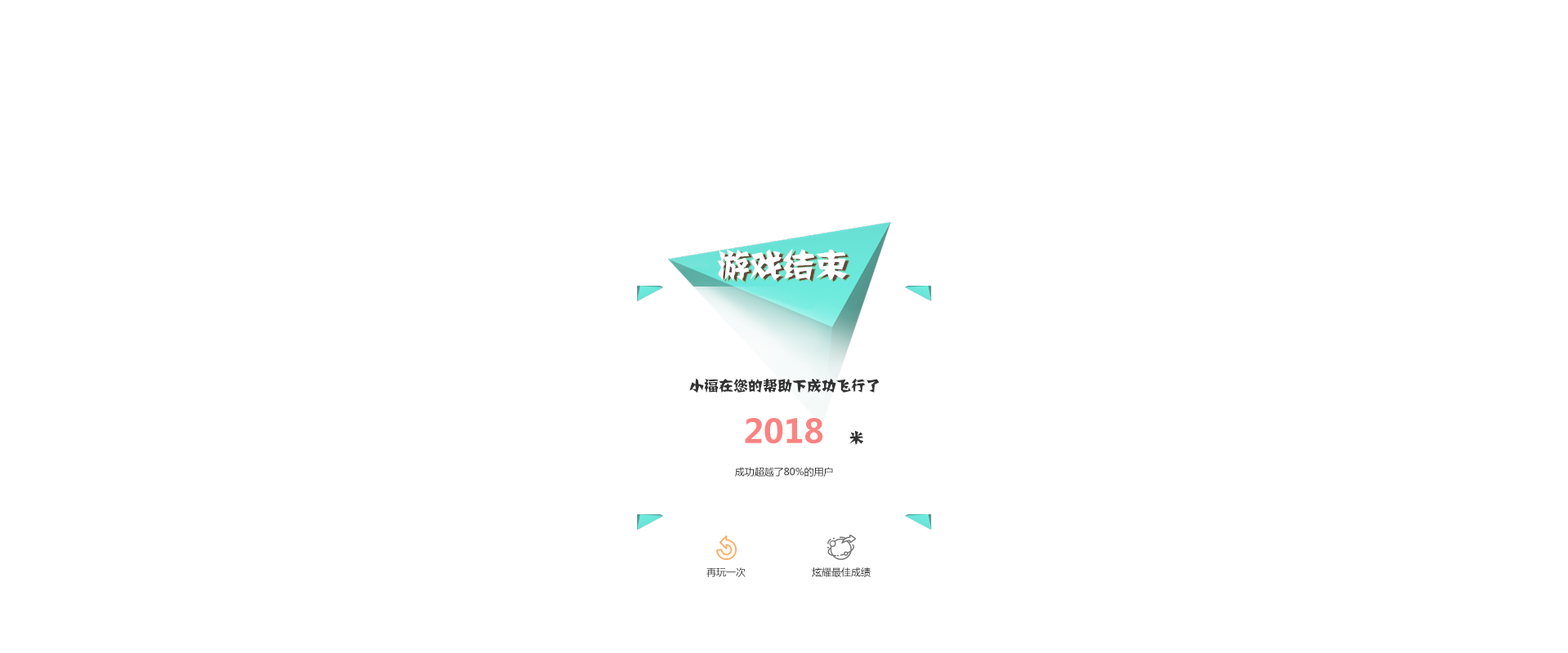
<style>
.page{position:relative;width:1568px;height:653px;background:#ffffff}
.page>*{position:absolute;margin:0}
.t1{font:32.7px "JJianzi";color:#ffffff}
.t2{font:32.7px "JJianzi"}
.t3{font:14.7px/52.3px "JJianzi";color:#333333}
.t4{font:32.7px "MicrosoftYaHei-Bold";color:#fa8381}
.t5{font:9.8px "MicrosoftYaHei";color:#333333}
</style>
<div class="page">
<p class="t1" style="left:717px;top:249px;width:131px;height:32px">游戏结束</p>
<p class="t2" style="left:720px;top:251px;width:131px;height:32px">游戏结束</p>
<p class="t3" style="left:689px;top:378px;width:191px;height:67px;text-align:center">小福在您的帮助下成功飞行了<br>                                       米</p>
<p class="t4" style="left:745px;top:418px;width:78px;height:26px">2018</p>
<p class="t5" style="left:735px;top:467px;width:98px;height:10px">成功超越了80%的用户</p>
<p class="t5" style="left:706px;top:568px;width:40px;height:9px">再玩一次</p>
<p class="t5" style="left:812px;top:568px;width:59px;height:9px">炫耀最佳成绩</p>
</div>
